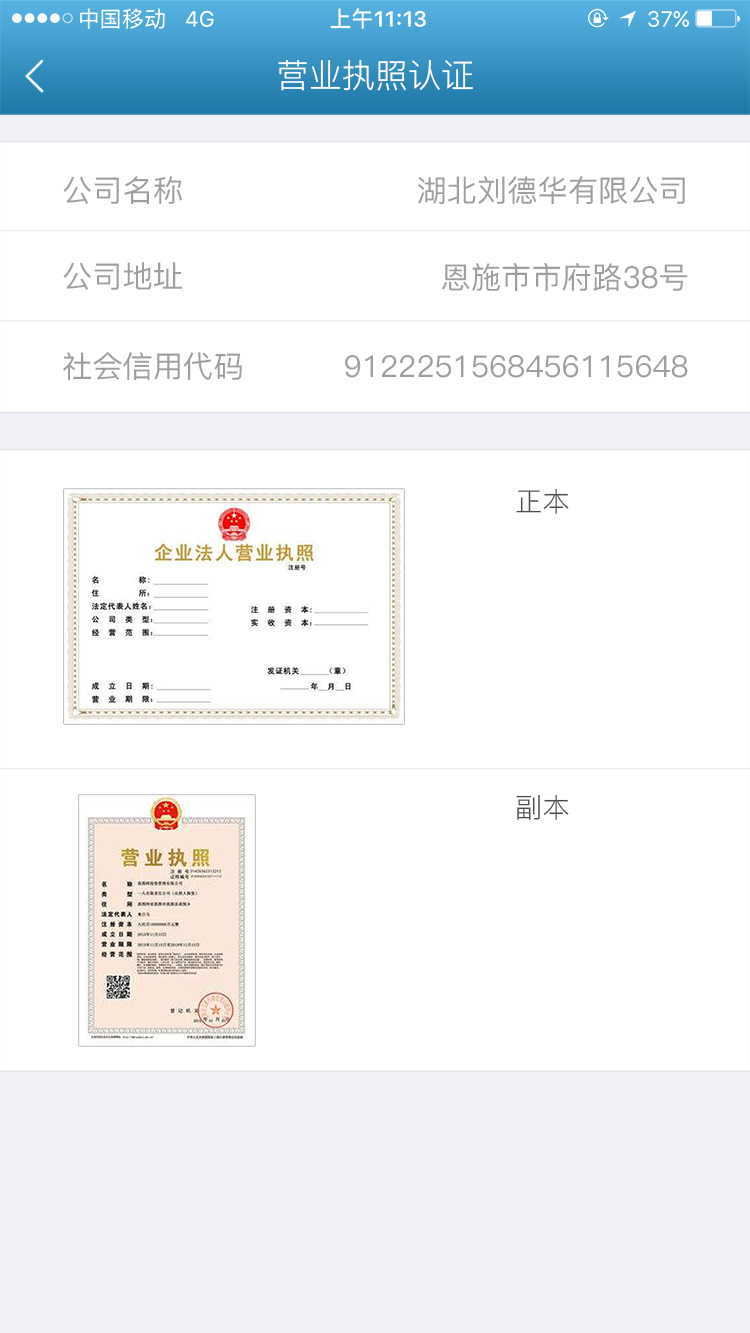
<style>
.page{position:relative;width:750px;height:1333px;background:#ffffff}
.page>*{position:absolute;margin:0}
.t1{font:33.3px "PingFang-SC-Regular";color:#ffffff}
.t2{font:30.2px "PingFang-SC-Medium";color:#9f9f9f}
.t3{font:27.2px "PingFang-SC-Regular";color:#4d4d4d}
</style>
<div class="page">
<p class="t1" style="left:278px;top:59px;width:195px;height:32px">营业执照认证</p>
<p class="t2" style="left:63px;top:176px;width:119px;height:28px">公司名称</p>
<p class="t2" style="left:418px;top:176px;width:267px;height:28px">湖北刘德华有限公司</p>
<p class="t2" style="left:63px;top:262px;width:119px;height:28px">公司地址</p>
<p class="t2" style="left:442px;top:263px;width:246px;height:28px">恩施市市府路38号</p>
<p class="t2" style="left:63px;top:352px;width:179px;height:28px">社会信用代码</p>
<p class="t2" style="left:345px;top:355px;width:343px;height:23px">9122251568456115648</p>
<p class="t3" style="left:516px;top:489px;width:53px;height:25px">正本</p>
<p class="t3" style="left:516px;top:795px;width:53px;height:25px">副本</p>
</div>
